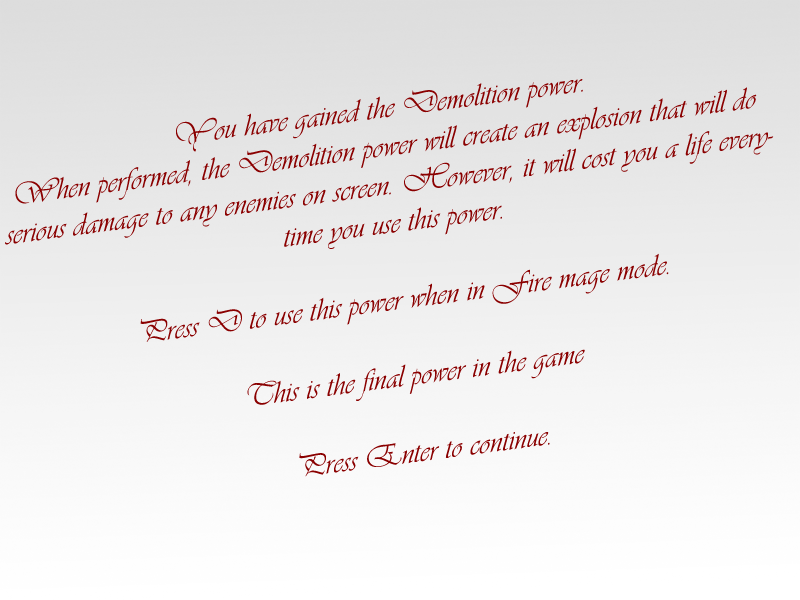
<style>
.page{position:relative;width:800px;height:600px}
.page>*{position:absolute;margin:0}
.t1{font:32px "Vivaldii";color:#8a0000}
</style>
<div class="page">
<p class="t1" style="left:5px;top:79px;width:769px;height:398px;text-align:center;rotate:-7deg">You have gained the Demolition power.<br>When performed, the Demolition power will create an explosion that will do serious damage to any enemies on screen. However, it will cost you a life everytime you use this power.<br><br>Press D to use this power when in Fire mage mode.<br><br>This is the final power in the game<br><br>Press Enter to continue.</p>
</div>
